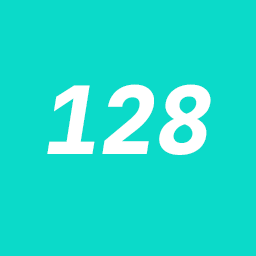
<style>
.page{position:relative;width:256px;height:256px;background:#0bdac9}
.page>*{position:absolute;margin:0}
.t1{font:93.7px "JetBrainsMono-ExtraBoldItalic";color:#ffffff}
</style>
<div class="page">
<p class="t1" style="left:47px;top:84px;width:164px;height:71px">128</p>
</div>
